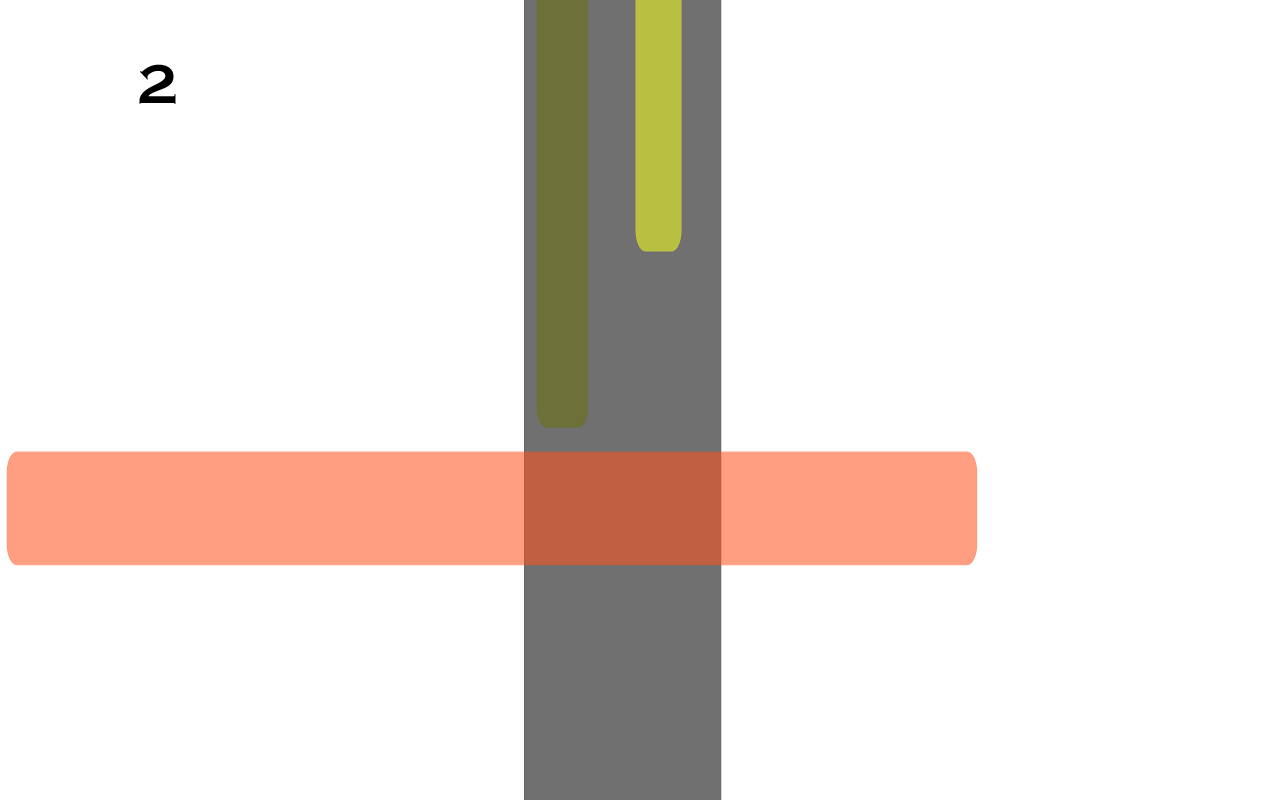
<style>
.page{position:relative;width:1280px;height:800px;background:#ffffff}
.page>*{position:absolute;margin:0}
.t1{font:72px "Copperplate";color:#000000}
</style>
<div class="page">
<p class="t1" style="left:139px;top:64px;width:37px;height:40px">2</p>
</div>
